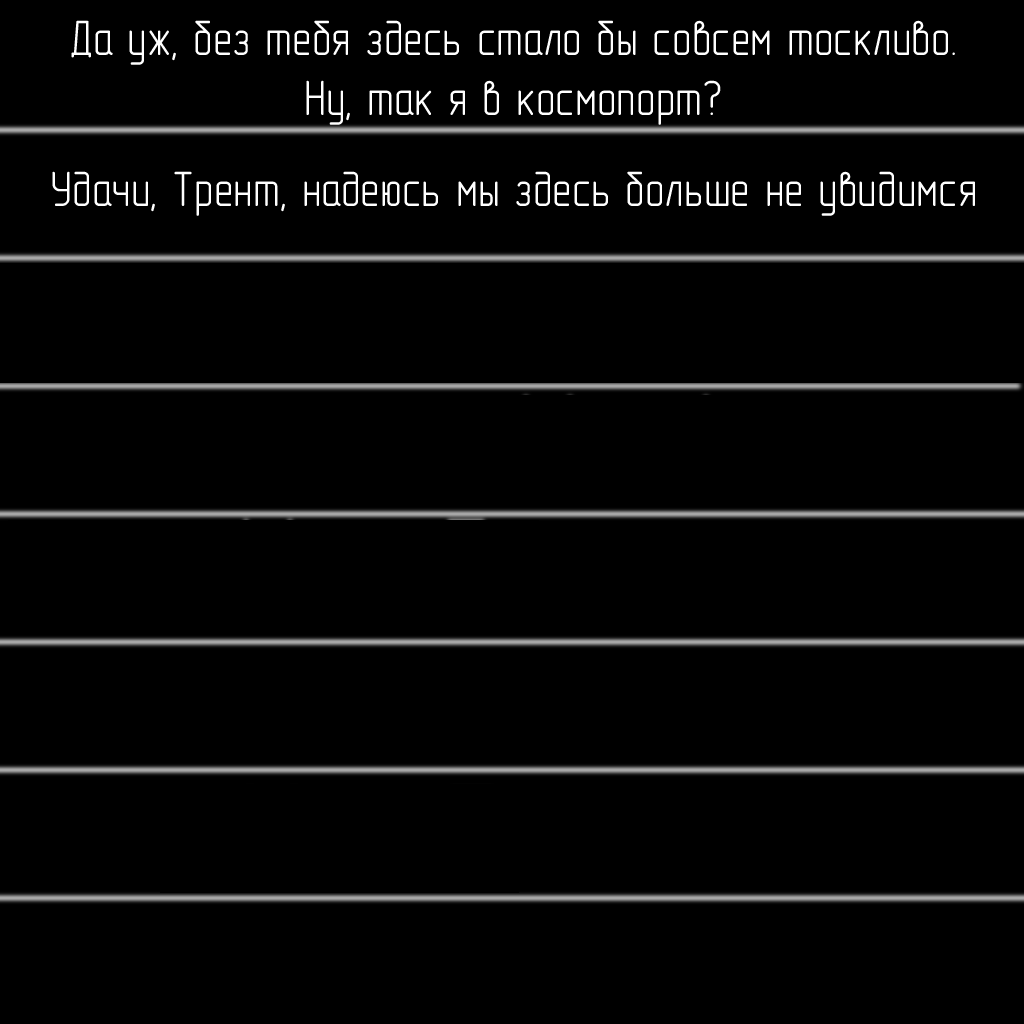
<style>
.page{position:relative;width:1024px;height:1024px;background:#000000}
.page>*{position:absolute;margin:0}
.t1{font:50px "GOST-2.304-81typeA";color:#ffffff}
</style>
<div class="page">
<p class="t1" style="left:71px;top:20px;width:884px;height:105px;text-align:center">Да уж, без тебя здесь стало бы совсем тоскливо.<br>Ну, так я в космопорт?</p>
<p class="t1" style="left:52px;top:171px;width:923px;height:45px">Удачи, Трент, надеюсь мы здесь больше не увидимся</p>
</div>
